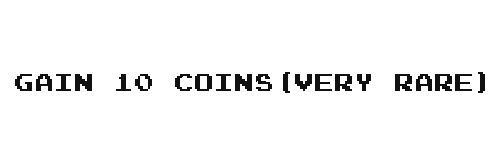
<style>
.page{position:relative;width:500px;height:150px;background:#ffffff}
.page>*{position:absolute;margin:0}
.t1{font:24px "JoystixMonospace-Regular";color:#111111}
</style>
<div class="page">
<p class="t1" style="left:15px;top:72px;width:470px;height:21px">Gain 10 coins(Very Rare)</p>
</div>
